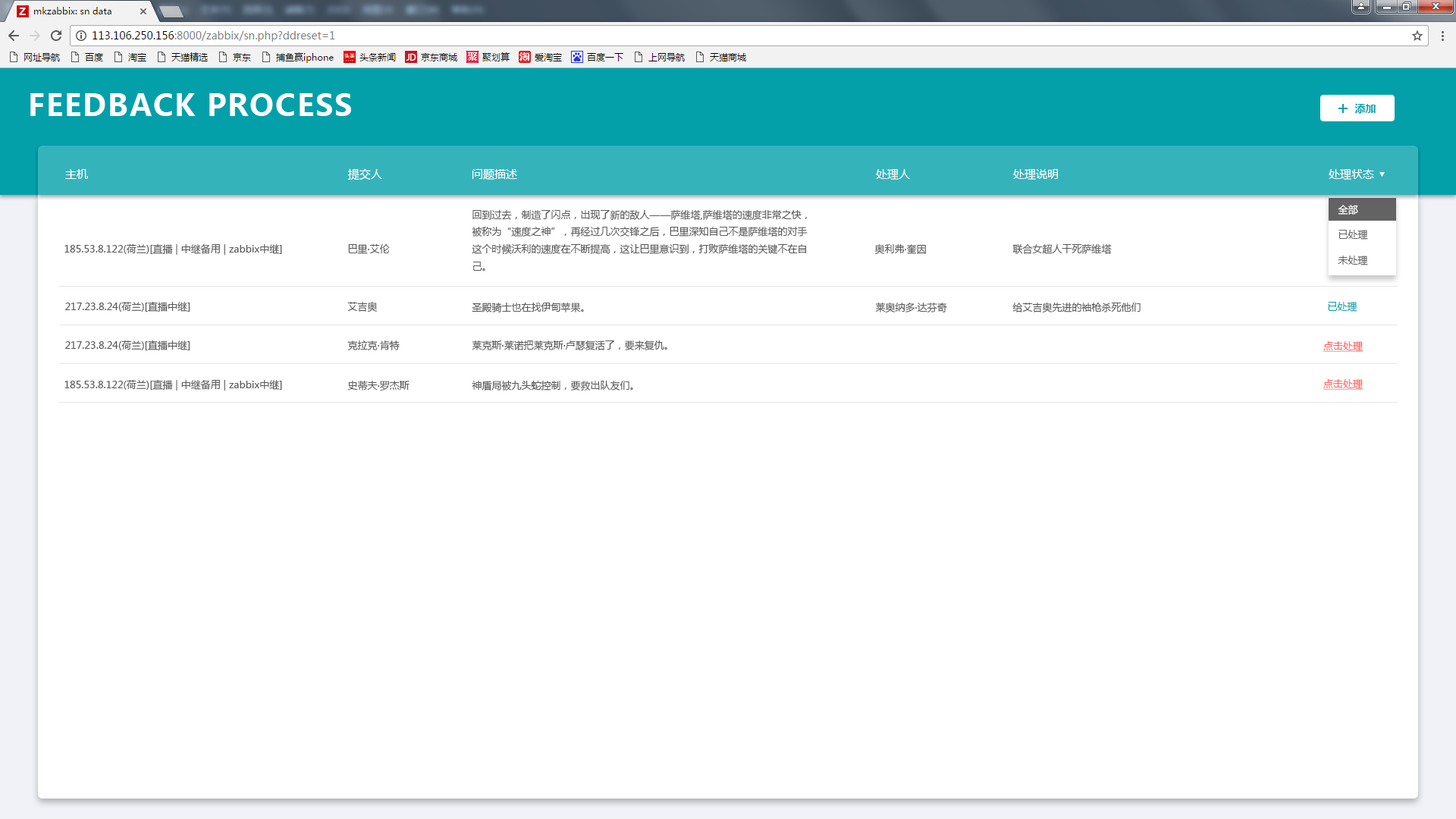
<style>
.page{position:relative;width:1456px;height:819px;background:#ffffff}
.page>*{position:absolute;margin:0}
.t1{font:29.6px "MicrosoftYaHei-Bold";letter-spacing:0.05em;color:#ffffff;text-transform:uppercase}
.t2{font:10.6px "MicrosoftYaHei-Bold";color:#03a0aa}
.t3{font:11.4px "MicrosoftYaHei";color:#ffffff}
.t4{font:9.9px "MicrosoftYaHei";color:#5b5b5b}
.t5{font:9.9px "MicrosoftYaHei";color:#ffffff}
.t6{font:9.9px "MicrosoftYaHei";color:#636363}
.t7{font:9.9px "MicrosoftYaHei";color:#03a0aa}
.t8{font:9.9px "MicrosoftYaHei";color:#ff6666;text-decoration:underline}
</style>
<div class="page">
<p class="t1" style="left:30px;top:93px;width:321px;height:23px">Feedback process</p>
<p class="t2" style="left:1354px;top:103px;width:22px;height:11px">添加</p>
<p class="t3" style="left:65px;top:169px;width:23px;height:10px">主机</p>
<p class="t3" style="left:348px;top:168px;width:34px;height:12px">提交人</p>
<p class="t3" style="left:472px;top:169px;width:45px;height:11px">问题描述</p>
<p class="t3" style="left:876px;top:169px;width:34px;height:11px">处理人</p>
<p class="t3" style="left:1013px;top:169px;width:45px;height:11px">处理说明</p>
<p class="t3" style="left:1329px;top:169px;width:45px;height:11px">处理状态</p>
<p class="t4" style="left:472px;top:209px;width:336px;height:62px">回到过去，制造了闪点，出现了新的敌人——萨维塔,萨维塔的速度非常之快，<br>被称为“速度之神”，再经过几次交锋之后，巴里深知自己不是萨维塔的对手<br>这个时候沃利的速度在不断提高，这让巴里意识到，打败萨维塔的关键不在自<br>己。</p>
<p class="t5" style="left:1338px;top:205px;width:20px;height:10px">全部</p>
<p class="t6" style="left:1338px;top:230px;width:30px;height:10px">已处理</p>
<p class="t4" style="left:64px;top:243px;width:218px;height:12px">185.53.8.122(荷兰)[直播 | 中继备用 | zabbix中继]</p>
<p class="t4" style="left:348px;top:244px;width:42px;height:10px">巴里·艾伦</p>
<p class="t4" style="left:874px;top:243px;width:52px;height:12px">奥利弗·奎因</p>
<p class="t4" style="left:1012px;top:243px;width:100px;height:11px">联合女超人干死萨维塔</p>
<p class="t6" style="left:1338px;top:256px;width:30px;height:9px">未处理</p>
<p class="t4" style="left:65px;top:301px;width:125px;height:11px">217.23.8.24(荷兰)[直播中继]</p>
<p class="t4" style="left:347px;top:301px;width:31px;height:11px">艾吉奥</p>
<p class="t4" style="left:472px;top:303px;width:112px;height:9px">圣殿骑士也在找伊甸苹果。</p>
<p class="t4" style="left:875px;top:302px;width:72px;height:11px">莱奥纳多·达芬奇</p>
<p class="t4" style="left:1012px;top:302px;width:129px;height:11px">给艾吉奥先进的袖枪杀死他们</p>
<p class="t7" style="left:1328px;top:302px;width:29px;height:10px">已处理</p>
<p class="t4" style="left:65px;top:340px;width:125px;height:10px">217.23.8.24(荷兰)[直播中继]</p>
<p class="t4" style="left:347px;top:340px;width:53px;height:10px">克拉克·肯特</p>
<p class="t4" style="left:472px;top:340px;width:195px;height:10px">莱克斯·莱诺把莱克斯·卢瑟复活了，要来复仇。</p>
<p class="t8" style="left:1323px;top:341px;width:40px;height:11px">点击处理</p>
<p class="t4" style="left:64px;top:379px;width:218px;height:12px">185.53.8.122(荷兰)[直播 | 中继备用 | zabbix中继]</p>
<p class="t4" style="left:347px;top:381px;width:62px;height:10px">史蒂夫·罗杰斯</p>
<p class="t4" style="left:472px;top:380px;width:161px;height:11px">神盾局被九头蛇控制，要救出队友们。</p>
<p class="t8" style="left:1323px;top:379px;width:40px;height:11px">点击处理</p>
</div>
